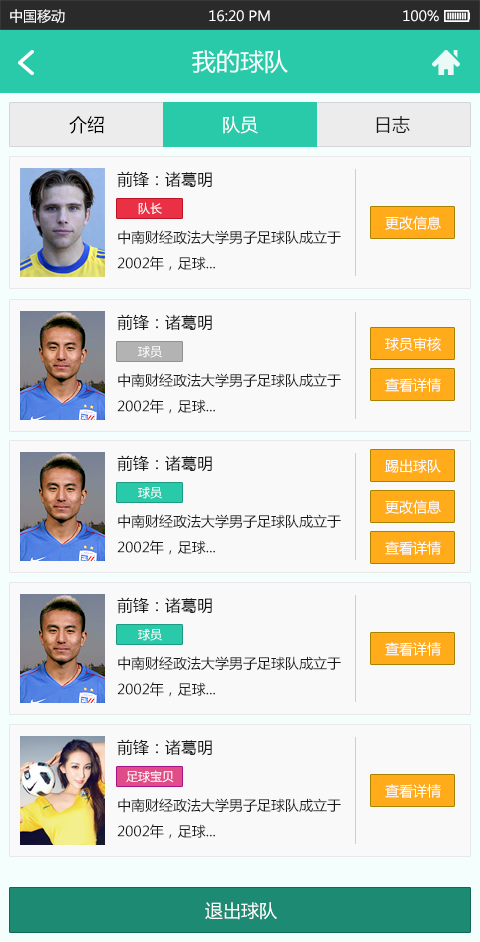
<style>
.page{position:relative;width:480px;height:942px;background:#f9f9f9}
.page>*{position:absolute;margin:0}
.t1{font:14px "MicrosoftYaHei";color:#ffffff}
.t2{font:24px "MicrosoftYaHei";color:#f4fffd}
.t3{font:18px "MicrosoftYaHei";color:#000000}
.t4{font:18px "MicrosoftYaHei";color:#ffffff}
.t5{font:18px "MicrosoftYaHei";color:#191919}
.t6{font:16px "MicrosoftYaHei";color:#191919}
.t7{font:12px "MicrosoftYaHei";color:#ffffff}
.t8{font:14px/26px "MicrosoftYaHei";color:#191919}
</style>
<div class="page">
<p class="t1" style="left:10px;top:9px;width:55px;height:14px">中国移动</p>
<p class="t1" style="left:209px;top:10px;width:61px;height:12px">16:20 PM</p>
<p class="t1" style="left:403px;top:10px;width:36px;height:12px">100%</p>
<p class="t2" style="left:192px;top:50px;width:96px;height:24px">我的球队</p>
<p class="t3" style="left:69px;top:116px;width:35px;height:18px">介绍</p>
<p class="t4" style="left:223px;top:116px;width:35px;height:18px">队员</p>
<p class="t5" style="left:376px;top:116px;width:34px;height:17px">日志</p>
<p class="t6" style="left:117px;top:171px;width:95px;height:17px">前锋：诸葛明</p>
<p class="t7" style="left:138px;top:202px;width:24px;height:13px">队长</p>
<p class="t1" style="left:385px;top:216px;width:56px;height:14px">更改信息</p>
<p class="t8" style="left:117px;top:230px;width:224px;height:41px">中南财经政法大学男子足球队成立于2002年，足球...</p>
<p class="t6" style="left:117px;top:314px;width:95px;height:17px">前锋：诸葛明</p>
<p class="t1" style="left:385px;top:337px;width:56px;height:14px">球员审核</p>
<p class="t7" style="left:138px;top:346px;width:24px;height:12px">球员</p>
<p class="t8" style="left:117px;top:373px;width:224px;height:41px">中南财经政法大学男子足球队成立于2002年，足球...</p>
<p class="t1" style="left:385px;top:378px;width:56px;height:14px">查看详情</p>
<p class="t6" style="left:117px;top:455px;width:95px;height:17px">前锋：诸葛明</p>
<p class="t1" style="left:385px;top:459px;width:56px;height:14px">踢出球队</p>
<p class="t7" style="left:138px;top:487px;width:24px;height:12px">球员</p>
<p class="t1" style="left:385px;top:500px;width:56px;height:14px">更改信息</p>
<p class="t8" style="left:117px;top:514px;width:224px;height:41px">中南财经政法大学男子足球队成立于2002年，足球...</p>
<p class="t1" style="left:385px;top:541px;width:56px;height:14px">查看详情</p>
<p class="t6" style="left:117px;top:597px;width:95px;height:17px">前锋：诸葛明</p>
<p class="t7" style="left:138px;top:629px;width:24px;height:12px">球员</p>
<p class="t1" style="left:385px;top:642px;width:56px;height:14px">查看详情</p>
<p class="t8" style="left:117px;top:656px;width:224px;height:41px">中南财经政法大学男子足球队成立于2002年，足球...</p>
<p class="t6" style="left:117px;top:739px;width:95px;height:17px">前锋：诸葛明</p>
<p class="t7" style="left:126px;top:770px;width:48px;height:13px">足球宝贝</p>
<p class="t1" style="left:385px;top:784px;width:56px;height:14px">查看详情</p>
<p class="t8" style="left:117px;top:798px;width:224px;height:41px">中南财经政法大学男子足球队成立于2002年，足球...</p>
<p class="t4" style="left:205px;top:902px;width:72px;height:18px">退出球队</p>
</div>
